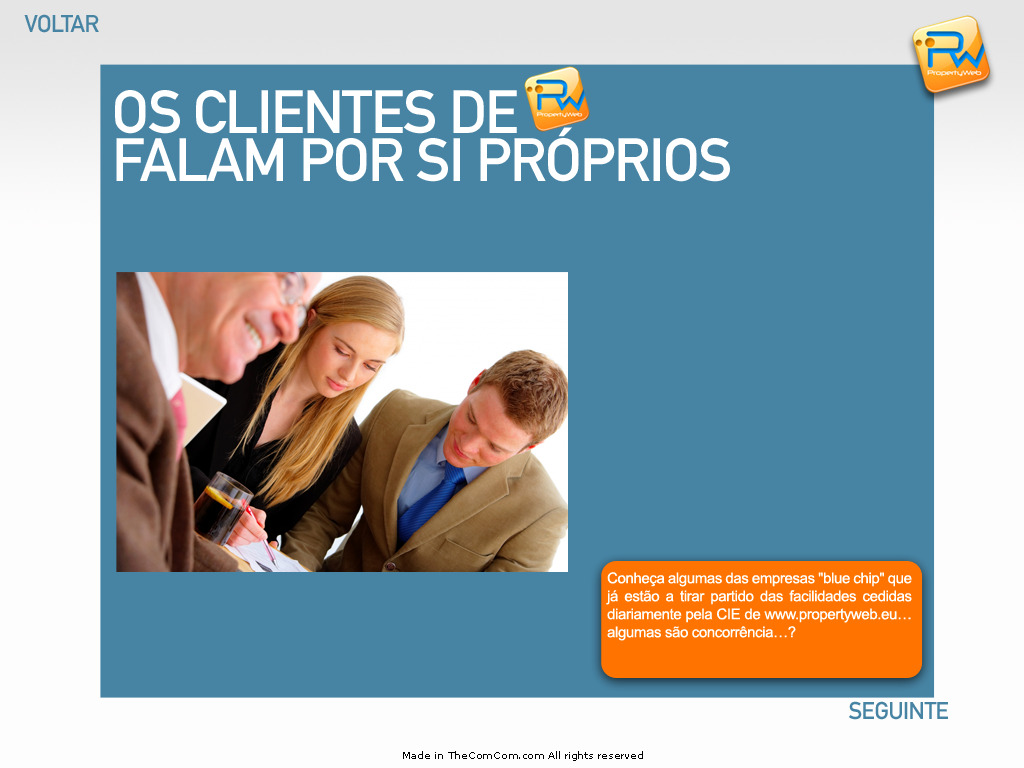
<style>
.page{position:relative;width:1024px;height:768px;background:#4784a4}
.page>*{position:absolute;margin:0}
.t1{font:24px "DINMittelschriftStd";letter-spacing:-0.025em;color:#4784a4}
.t2{font:60px "DINMittelschriftStd";letter-spacing:-0.025em;color:#ffffff;text-transform:uppercase}
.t3{font:15px "ArialMT";letter-spacing:-0.025em;color:#ffffff}
.t4{font:10px "MSReferenceSansSerif";letter-spacing:-0.025em;color:#010101}
</style>
<div class="page">
<p class="t1" style="left:24px;top:14px;width:75px;height:19px">VOLTAR</p>
<p class="t2" style="left:115px;top:90px;width:615px;height:92px">OS CLIENTES DE         FALAM POR SI PRÓPRIOS</p>
<p class="t3" style="left:606px;top:572px;width:306px;height:69px;text-align:justify">Conheça algumas das empresas "blue chip" que já estão a tirar partido das facilidades cedidas diariamente pela CIE de www.propertyweb.eu… algumas são concorrência…?</p>
<p class="t1" style="left:848px;top:701px;width:100px;height:19px">SEGUINTE</p>
<p class="t4" style="left:403px;top:751px;width:240px;height:10px">Made in TheComCom.com All rights reserved</p>
</div>
